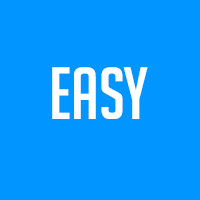
<style>
.page{position:relative;width:200px;height:200px;background:#0095ff}
.page>*{position:absolute;margin:0}
.t1{font:72px "BigNoodleTitling";color:#feffff}
</style>
<div class="page">
<p class="t1" style="left:52px;top:67px;width:96px;height:52px">eASY</p>
</div>
